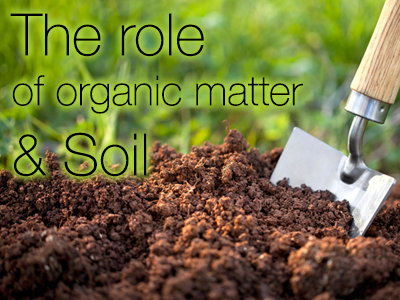
<style>
.page{position:relative;width:400px;height:300px}
.page>*{position:absolute;margin:0}
.t1{font:41.7px "HelveticaNeue-Thin";color:#000000}
.t2{font:58.3px "HelveticaNeue-Thin";color:#000000}
</style>
<div class="page">
<p class="t1" style="left:10px;top:13px;width:293px;height:164px"><span class="t2">The role<br></span>of organic matter<br><span class="t2">&amp; Soil</span></p>
</div>
